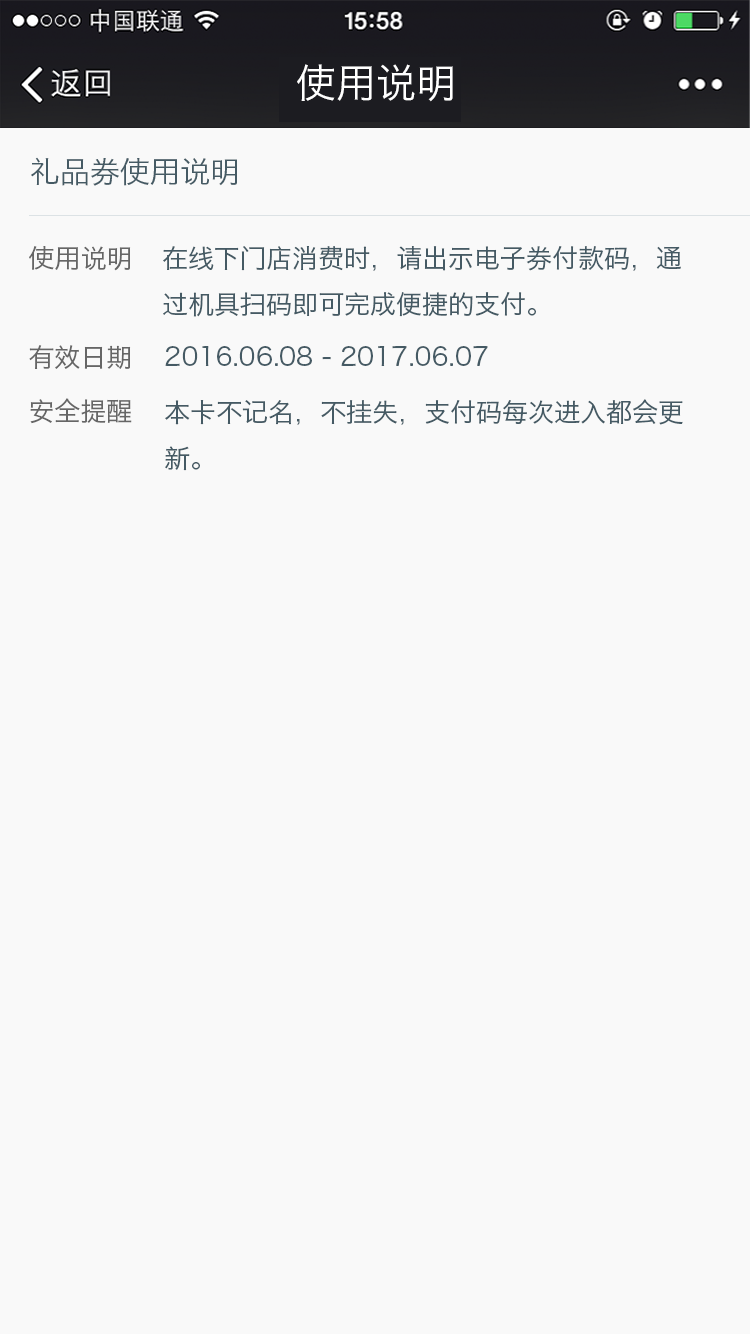
<style>
.page{position:relative;width:750px;height:1334px;background:#f9f9f9}
.page>*{position:absolute;margin:0}
.t1{font:40px "HiraginoSansGB-W3";color:#ffffff}
.t2{font:30px "HiraginoSansGB-W3";color:#455a64}
.t3{font:26px "HiraginoSansGB-W3";color:#666666}
.t4{font:26px "HiraginoSansGB-W3";color:#455a64}
</style>
<div class="page">
<p class="t1" style="left:297px;top:64px;width:156px;height:38px">使用说明</p>
<p class="t2" style="left:31px;top:157px;width:206px;height:29px">礼品券使用说明</p>
<p class="t3" style="left:29px;top:246px;width:102px;height:25px">使用说明</p>
<p class="t4" style="left:163px;top:246px;width:518px;height:71px">在线下门店消费时，请出示电子券付款码，通<br>过机具扫码即可完成便捷的支付。</p>
<p class="t3" style="left:29px;top:345px;width:102px;height:24px">有效日期</p>
<p class="t4" style="left:165px;top:346px;width:323px;height:20px">2016.06.08 - 2017.06.07</p>
<p class="t3" style="left:30px;top:398px;width:102px;height:26px">安全提醒</p>
<p class="t4" style="left:165px;top:399px;width:518px;height:72px">本卡不记名，不挂失，支付码每次进入都会更<br>新。</p>
</div>
